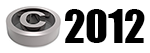
<style>
.page{position:relative;width:150px;height:53px;background:#ffffff}
.page>*{position:absolute;margin:0}
.t1{font:42.9px "Impact";color:#000000}
</style>
<div class="page">
<p class="t1" style="left:65px;top:9px;width:80px;height:34px">2012</p>
</div>
